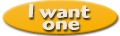
<style>
.page{position:relative;width:120px;height:36px}
.page>*{position:absolute;margin:0}
.t1{font:20px/12px "HighlanderOSITCTTBold";color:#ece9e4;scale:1.1 1}
</style>
<div class="page">
<p class="t1" style="left:28px;top:3px;width:62px;height:27px;text-align:center">I want <br>one</p>
</div>
